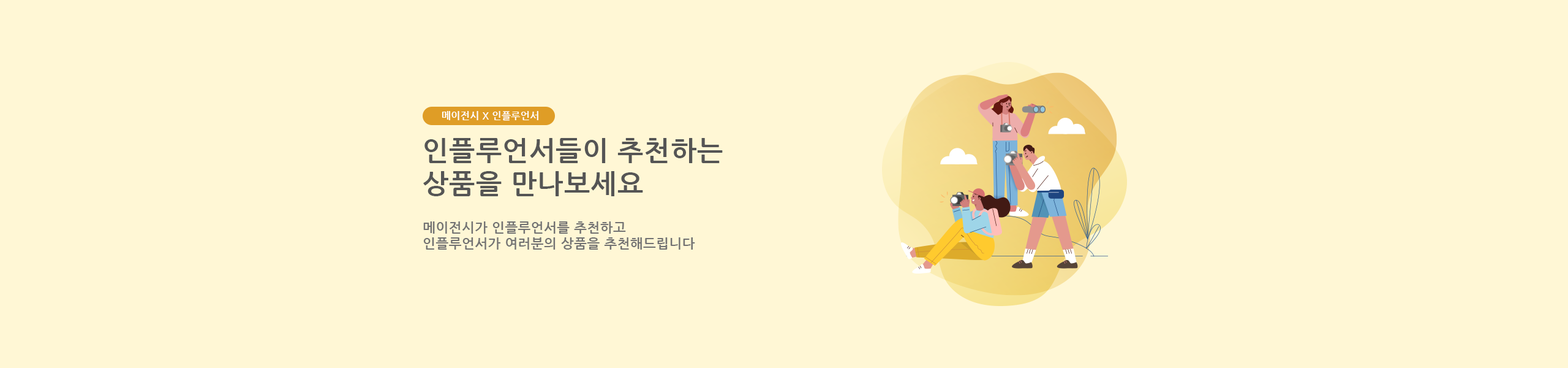
<style>
.page{position:relative;width:1568px;height:368px;background:#fff7d5}
.page>*{position:absolute;margin:0}
.t1{font:9.8px "NanumGothicBold";letter-spacing:0.025em;color:#ffffff}
.t2{font:27.6px "NanumGothicBold";letter-spacing:0.025em;color:#555555}
.t3{font:13.5px "NanumGothicBold";letter-spacing:0.025em;color:#737373}
</style>
<div class="page">
<p class="t1" style="left:442px;top:111px;width:96px;height:10px">메이전시 X 인플루언서</p>
<p class="t2" style="left:423px;top:138px;width:300px;height:58px">인플루언서들이 추천하는<br>상품을 만나보세요</p>
<p class="t3" style="left:423px;top:221px;width:272px;height:28px">메이전시가 인플루언서를 추천하고<br>인플루언서가 여러분의 상품을 추천해드립니다</p>
</div>
